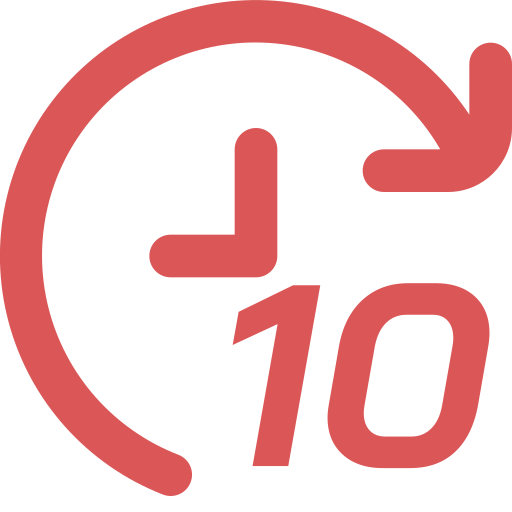
<style>
.page{position:relative;width:512px;height:512px;background:#ffffff}
.page>*{position:absolute;margin:0}
.t1{font:258.2px "BaiJamjuree-BoldItalic";color:#db5757}
</style>
<div class="page">
<p class="t1" style="left:232px;top:283px;width:258px;height:186px">10</p>
</div>
